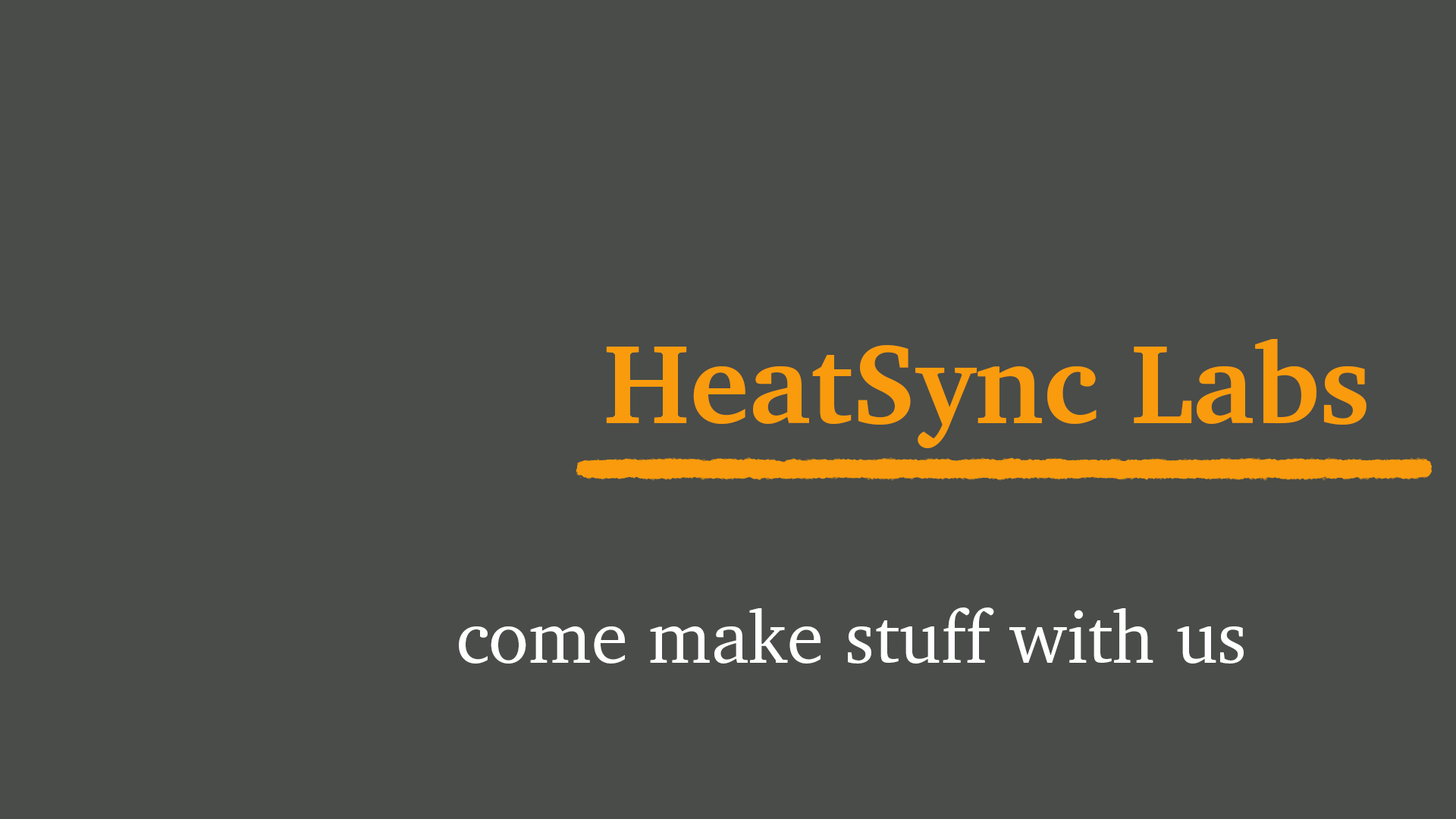
<style>
.page{position:relative;width:1456px;height:819px;background:#494c49}
.page>*{position:absolute;margin:0}
.t1{font:113.7px "Charter-Bold";color:#f99b0c}
.t2{font:74.3px "Charter";color:#ffffff}
</style>
<div class="page">
<p class="t1" style="left:606px;top:339px;width:760px;height:109px">HeatSync Labs</p>
<p class="t2" style="left:459px;top:607px;width:785px;height:57px">come make stuff with us</p>
</div>
